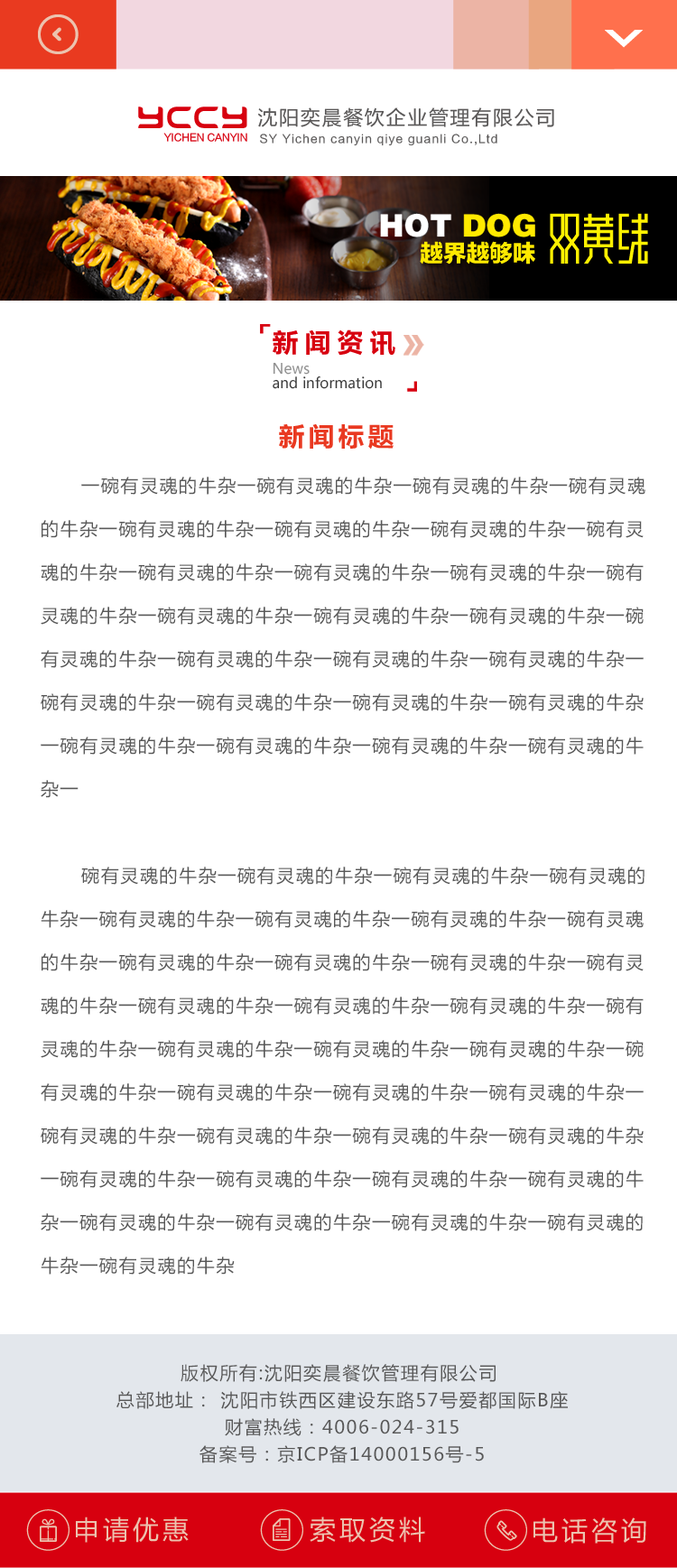
<style>
.page{position:relative;width:677px;height:1568px;background:#ffffff}
.page>*{position:absolute;margin:0}
.t1{font:41.5px "FYYZZT-";color:#d7000f}
.t2{font:20.4px "FZLTHK--GBK1-0";letter-spacing:0.05em;color:#595757}
.t3{font:9.8px "FZLTHJW--GB1-0";color:#d7000f}
.t4{font:11.2px "FZLTHK--GBK1-0";letter-spacing:0.1em;color:#595757}
.t5{font:31.1px "FZCCHJW--GB1-0";color:#ffffff;text-transform:uppercase}
.t6{font:31.1px "FZCCHJW--GB1-0";color:#ffea00;text-transform:uppercase}
.t7{font:23.6px "FZLTTHK--GBK1-0";color:#ffea00;text-transform:uppercase}
.t8{font:27.1px "FZLTCHK--GBK1-0";letter-spacing:0.2em;color:#d7000f}
.t9{font:14.5px/14.5px "MicrosoftYaHei";color:#383838}
.t10{font:14.5px/14.5px "MicrosoftYaHei";color:#919191}
.t11{font:27.1px "FZLTCHJW--GB1-0";letter-spacing:0.1em;color:#e93921}
.t12{font:18.1px/43.3px "MicrosoftYaHei";letter-spacing:0.08em;color:#585858}
.t13{font:18.1px/27.1px "MicrosoftYaHei";letter-spacing:0.08em;color:#585858}
.t14{font:27.1px "FZLTHK--GBK1-0";letter-spacing:0.1em;color:#ecc3af}
</style>
<div class="page">
<p class="t1" style="left:138px;top:107px;width:109px;height:21px">yccy</p>
<p class="t2" style="left:257px;top:107px;width:297px;height:20px">沈阳奕晨餐饮企业管理有限公司</p>
<p class="t3" style="left:163px;top:133px;width:84px;height:9px">YICHEN CANYIN</p>
<p class="t4" style="left:260px;top:134px;width:237px;height:12px">SY Yichen canyin qiye guanli Co.,Ltd</p>
<p class="t5" style="left:380px;top:213px;width:155px;height:24px">hot <span class="t6">dog</span></p>
<p class="t7" style="left:420px;top:241px;width:115px;height:23px">越界越够味</p>
<p class="t8" style="left:273px;top:329px;width:122px;height:27px">新闻资讯</p>
<p class="t9" style="left:273px;top:362px;width:109px;height:27px"><span class="t10">News <br></span>and information</p>
<p class="t11" style="left:279px;top:423px;width:115px;height:27px">新闻标题</p>
<p class="t12" style="left:41px;top:477px;width:604px;height:798px">一碗有灵魂的牛杂一碗有灵魂的牛杂一碗有灵魂的牛杂一碗有灵魂的牛杂一碗有灵魂的牛杂一碗有灵魂的牛杂一碗有灵魂的牛杂一碗有灵魂的牛杂一碗有灵魂的牛杂一碗有灵魂的牛杂一碗有灵魂的牛杂一碗有灵魂的牛杂一碗有灵魂的牛杂一碗有灵魂的牛杂一碗有灵魂的牛杂一碗有灵魂的牛杂一碗有灵魂的牛杂一碗有灵魂的牛杂一碗有灵魂的牛杂一碗有灵魂的牛杂一碗有灵魂的牛杂一碗有灵魂的牛杂一碗有灵魂的牛杂一碗有灵魂的牛杂一碗有灵魂的牛杂一碗有灵魂的牛杂一碗有灵魂的牛杂一<br><br>      碗有灵魂的牛杂一碗有灵魂的牛杂一碗有灵魂的牛杂一碗有灵魂的牛杂一碗有灵魂的牛杂一碗有灵魂的牛杂一碗有灵魂的牛杂一碗有灵魂的牛杂一碗有灵魂的牛杂一碗有灵魂的牛杂一碗有灵魂的牛杂一碗有灵魂的牛杂一碗有灵魂的牛杂一碗有灵魂的牛杂一碗有灵魂的牛杂一碗有灵魂的牛杂一碗有灵魂的牛杂一碗有灵魂的牛杂一碗有灵魂的牛杂一碗有灵魂的牛杂一碗有灵魂的牛杂一碗有灵魂的牛杂一碗有灵魂的牛杂一碗有灵魂的牛杂一碗有灵魂的牛杂一碗有灵魂的牛杂一碗有灵魂的牛杂一碗有灵魂的牛杂一碗有灵魂的牛杂一碗有灵魂的牛杂一碗有灵魂的牛杂一碗有灵魂的牛杂一碗有灵魂的牛杂一碗有灵魂的牛杂一碗有灵魂的牛杂一碗有灵魂的牛杂</p>
<p class="t13" style="left:116px;top:1364px;width:452px;height:99px;text-align:center">版权所有:沈阳奕晨餐饮管理有限公司 <br>总部地址： 沈阳市铁西区建设东路57号爱都国际B座<br>财富热线：4006-024-315<br>备案号：京ICP备14000156号-5</p>
<p class="t14" style="left:76px;top:1517px;width:113px;height:26px">申请优惠</p>
<p class="t14" style="left:310px;top:1517px;width:115px;height:26px">索取资料</p>
<p class="t14" style="left:533px;top:1517px;width:113px;height:27px">电话咨询</p>
</div>
